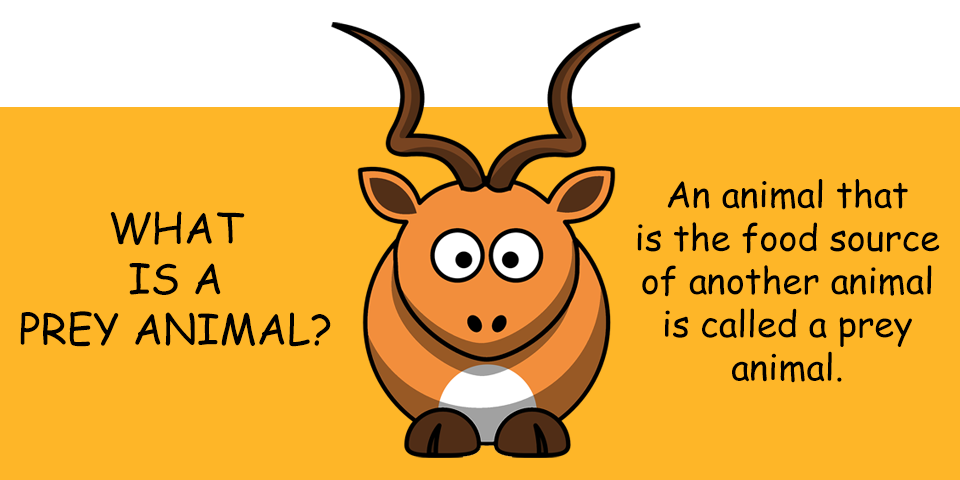
<style>
.page{position:relative;width:960px;height:480px;background:#feb628}
.page>*{position:absolute;margin:0}
.t1{font:36px "ComicSansMS";color:#000000}
.t2{font:42px "ComicSansMS";color:#000000}
</style>
<div class="page">
<p class="t1" style="left:637px;top:179px;width:303px;height:204px;text-align:center">An animal that<br>is the food source<br>of another animal<br>is called a prey<br>animal.</p>
<p class="t2" style="left:20px;top:211px;width:311px;height:136px;text-align:center">WHAT<br>IS A<br>PREY ANIMAL?</p>
</div>
